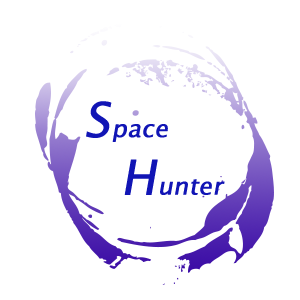
<style>
.page{position:relative;width:300px;height:300px;background:#ffffff}
.page>*{position:absolute;margin:0}
.t1{font:24px "LucidaSansUnicode";color:#1115b5;font-weight:bold;font-style:italic}
.t2{font:48px "LucidaSansUnicode";color:#1115b5;text-transform:uppercase;font-weight:bold;font-style:italic}
.t3{font:48px "LucidaSansUnicode";color:#1115b5;font-weight:bold;font-style:italic}
</style>
<div class="page">
<p class="t1" style="left:86px;top:101px;width:139px;height:94px;text-align:center"><span class="t2">S</span>pace<br>           <span class="t3">H</span>unter</p>
</div>
